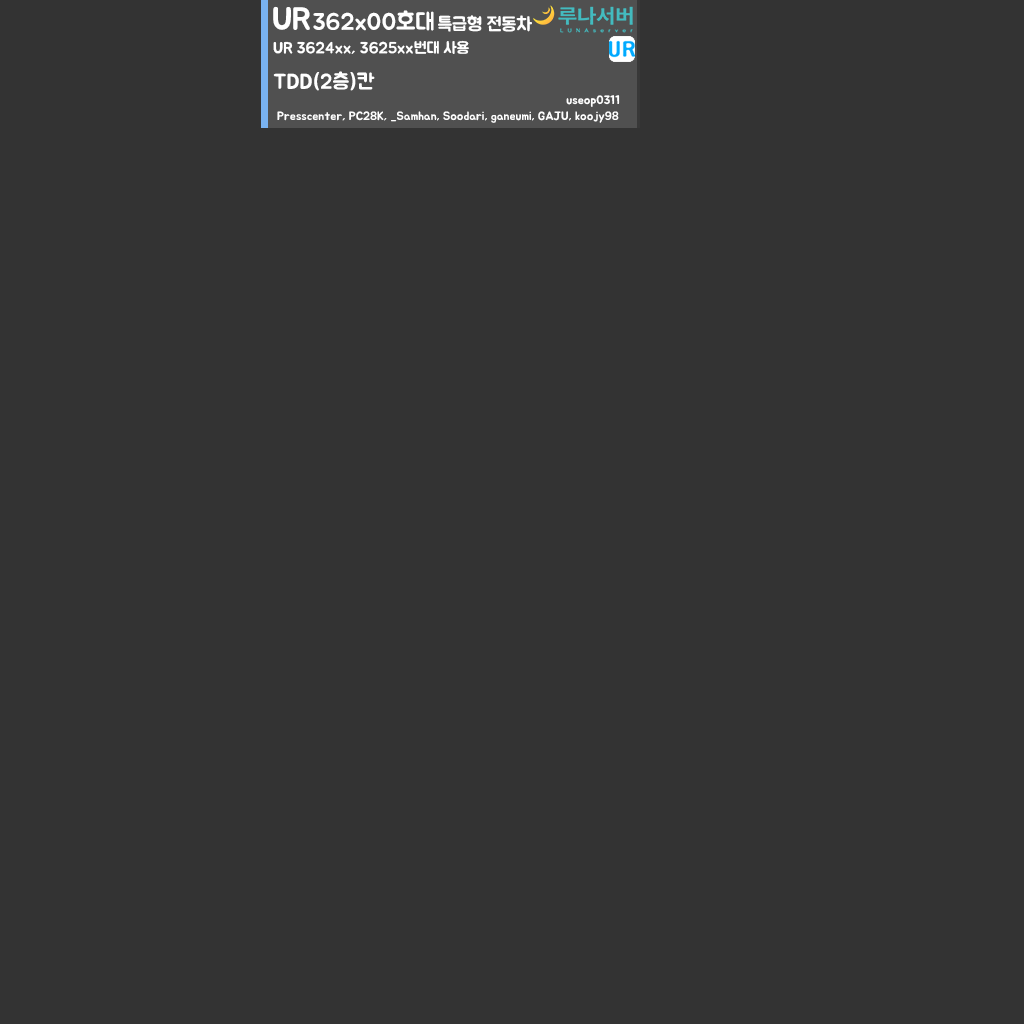
<style>
.page{position:relative;width:1024px;height:1024px;background:#333333}
.page>*{position:absolute;margin:0}
.t1{font:32px "BMJUA";color:#ffffff}
.t2{font:24px "BMJUA";color:#ffffff}
.t3{font:18.7px "BMJUA";color:#ffffff}
.t4{font:16px "BMJUA";color:#ffffff}
.t5{font:21.3px "BMJUA";color:#ffffff}
.t6{font:12px "BMJUA";color:#ffffff}
</style>
<div class="page">
<p class="t1" style="left:273px;top:6px;width:37px;height:24px">UR</p>
<p class="t2" style="left:313px;top:10px;width:121px;height:21px">362x00호대</p>
<p class="t3" style="left:438px;top:15px;width:94px;height:17px">특급형 전동차</p>
<p class="t4" style="left:273px;top:40px;width:196px;height:51px">UR 3624xx, 3625xx번대 사용 <br><span class="t5">TDD(2층)칸</span></p>
<p class="t6" style="left:566px;top:95px;width:54px;height:12px">useop0311</p>
</div>
